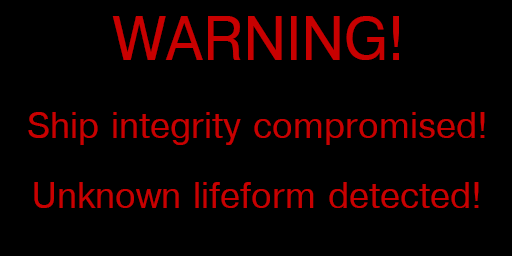
<style>
.page{position:relative;width:512px;height:256px;background:#000000}
.page>*{position:absolute;margin:0}
.t1{font:60px "Helvetica";color:#c80000}
.t2{font:36px "Helvetica";color:#c80000}
</style>
<div class="page">
<p class="t1" style="left:112px;top:16px;width:287px;height:44px">WARNING!</p>
<p class="t2" style="left:28px;top:112px;width:457px;height:33px">Ship integrity compromised!</p>
<p class="t2" style="left:34px;top:182px;width:445px;height:26px">Unknown lifeform detected!</p>
</div>
